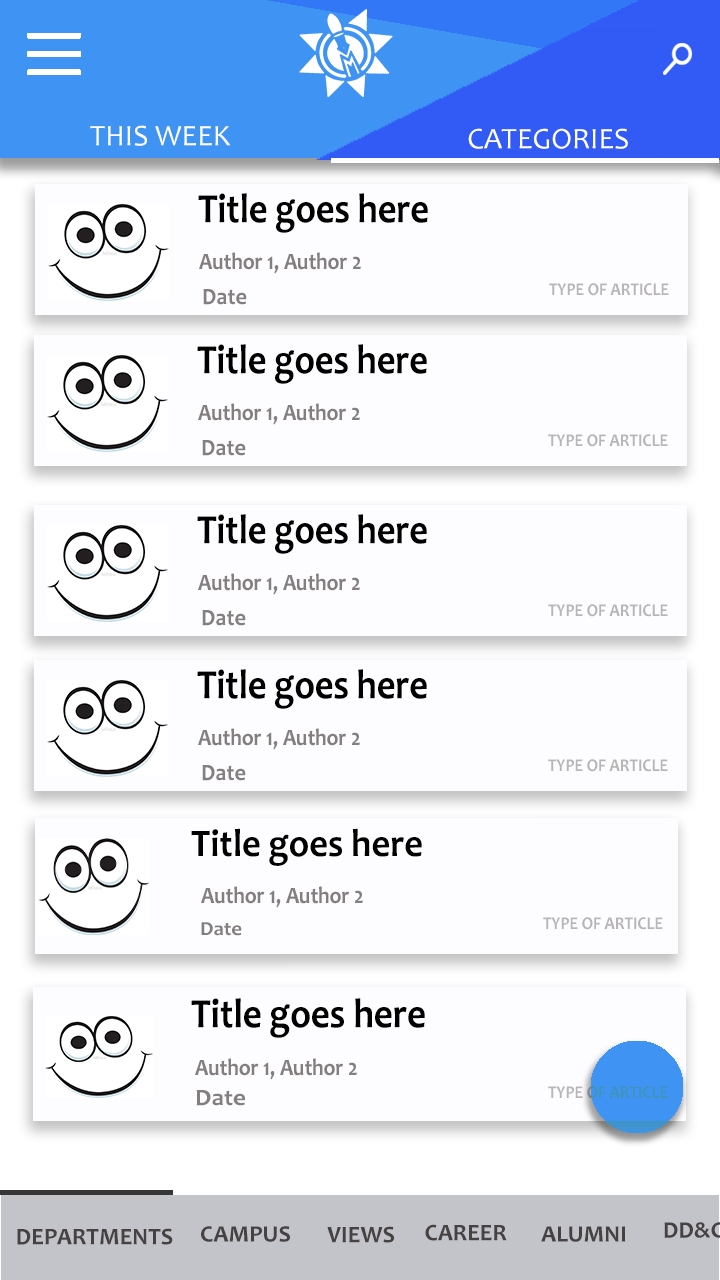
<style>
.page{position:relative;width:720px;height:1280px;background:#fdfdff}
.page>*{position:absolute;margin:0}
.t1{font:30px "Candara";color:#ffffff}
.t2{font:41.9px "Candara-Bold";color:#000000;scale:0.87 1}
.t3{font:23.7px "Candara-Bold";color:#847f7f;scale:0.89 1}
.t4{font:23.7px "Candara-Bold";color:#847f7f;scale:0.94 1}
.t5{font:18.2px "Candara-Bold";color:#b8b5b6;scale:0.89 1}
.t6{font:39.2px "Candara-Bold";color:#000000;scale:0.93 1}
.t7{font:20px "Candara-Bold";color:#847f7f;scale:1.04 1}
.t8{font:41.9px "Candara-Bold";color:#000000;scale:0.88 1}
.t9{font:18.2px "Candara-Bold";scale:0.89 1}
.t10{font:23.7px "Candara-Bold";color:#847f7f;scale:1.07 1}
.t11{font:24px "Candara-Bold";color:#464242}
.t12{font:23.7px "Candara-Bold";color:#464242}
</style>
<div class="page">
<p class="t1" style="left:90px;top:125px;width:141px;height:21px">THIS WEEK</p>
<p class="t1" style="left:468px;top:128px;width:160px;height:21px">CATEGORIES</p>
<p class="t2" style="left:198px;top:193px;width:230px;height:40px">Title goes here</p>
<p class="t3" style="left:199px;top:252px;width:162px;height:22px">Author 1, Author 2</p>
<p class="t4" style="left:203px;top:289px;width:44px;height:16px">Date</p>
<p class="t5" style="left:549px;top:283px;width:120px;height:13px">TYPE OF ARTICLE</p>
<p class="t2" style="left:197px;top:344px;width:230px;height:40px">Title goes here</p>
<p class="t3" style="left:198px;top:403px;width:162px;height:22px">Author 1, Author 2</p>
<p class="t5" style="left:548px;top:434px;width:120px;height:13px">TYPE OF ARTICLE</p>
<p class="t4" style="left:202px;top:440px;width:44px;height:16px">Date</p>
<p class="t2" style="left:197px;top:514px;width:230px;height:40px">Title goes here</p>
<p class="t3" style="left:198px;top:573px;width:162px;height:22px">Author 1, Author 2</p>
<p class="t5" style="left:548px;top:604px;width:120px;height:13px">TYPE OF ARTICLE</p>
<p class="t4" style="left:202px;top:610px;width:44px;height:16px">Date</p>
<p class="t2" style="left:197px;top:669px;width:230px;height:40px">Title goes here</p>
<p class="t3" style="left:198px;top:728px;width:162px;height:22px">Author 1, Author 2</p>
<p class="t5" style="left:548px;top:759px;width:120px;height:13px">TYPE OF ARTICLE</p>
<p class="t4" style="left:202px;top:765px;width:44px;height:16px">Date</p>
<p class="t6" style="left:191px;top:828px;width:231px;height:38px">Title goes here</p>
<p class="t3" style="left:201px;top:886px;width:162px;height:22px">Author 1, Author 2</p>
<p class="t5" style="left:543px;top:917px;width:120px;height:13px">TYPE OF ARTICLE</p>
<p class="t7" style="left:201px;top:922px;width:41px;height:14px">Date</p>
<p class="t8" style="left:191px;top:998px;width:234px;height:40px">Title goes here</p>
<p class="t3" style="left:195px;top:1058px;width:162px;height:22px">Author 1, Author 2</p>
<p class="t9" style="left:548px;top:1086px;width:120px;height:13px">TYPE OF ARTICLE</p>
<p class="t10" style="left:196px;top:1090px;width:49px;height:16px">Date</p>
<p class="t11" style="left:17px;top:1228px;width:156px;height:17px">DEPARTMENTS</p>
<p class="t12" style="left:201px;top:1226px;width:89px;height:16px">CAMPUS</p>
<p class="t11" style="left:327px;top:1226px;width:67px;height:17px">VIEWS</p>
<p class="t11" style="left:425px;top:1224px;width:82px;height:17px">CAREER</p>
<p class="t12" style="left:541px;top:1226px;width:85px;height:16px">ALUMNI</p>
</div>
